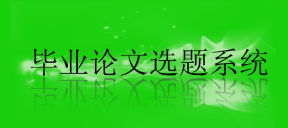
<style>
.page{position:relative;width:288px;height:128px}
.page>*{position:absolute;margin:0}
.t1{font:30px "SimSun";color:#060606}
.t2{font:39px "SimSun";scale:0.77 1}
</style>
<div class="page">
<p class="t1" style="left:30px;top:48px;width:238px;height:29px">毕业论文选题系统</p>
<p class="t2" style="left:30px;top:77px;width:238px;height:36px">毕业论文选题系统</p>
</div>
